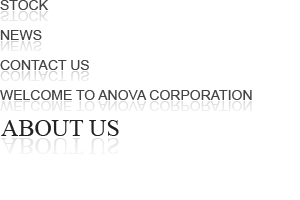
<style>
.page{position:relative;width:300px;height:200px;background:#ffffff}
.page>*{position:absolute;margin:0}
.t1{font:14px "ArialMT";color:#444444;text-transform:uppercase}
.t2{font:14px "ArialMT";color:#dfdfdf;text-transform:uppercase}
.t3{font:14px "ArialMT";color:#e4e4e4;text-transform:uppercase}
.t4{font:14px "ArialMT";color:#e0e0e0;text-transform:uppercase}
.t5{font:14px "ArialMT";color:#e7e7e7;text-transform:uppercase}
.t6{font:24px "TimesNewRomanPSMT";color:#222222;text-transform:uppercase}
.t7{font:24px "TimesNewRomanPSMT";color:#ececec;text-transform:uppercase}
</style>
<div class="page">
<p class="t1" style="left:0px;top:0px;width:49px;height:10px">stock</p>
<p class="t2" style="left:0px;top:11px;width:49px;height:10px">stock</p>
<p class="t1" style="left:0px;top:30px;width:42px;height:10px">News</p>
<p class="t3" style="left:0px;top:41px;width:42px;height:10px">News</p>
<p class="t1" style="left:0px;top:60px;width:89px;height:10px">contact us</p>
<p class="t4" style="left:0px;top:71px;width:89px;height:10px">contact us</p>
<p class="t1" style="left:0px;top:90px;width:252px;height:10px">welcome to anova corporation</p>
<p class="t5" style="left:0px;top:101px;width:252px;height:10px">welcome to anova corporation</p>
<p class="t6" style="left:1px;top:120px;width:118px;height:16px">about us</p>
<p class="t7" style="left:1px;top:138px;width:118px;height:16px">about us</p>
</div>
